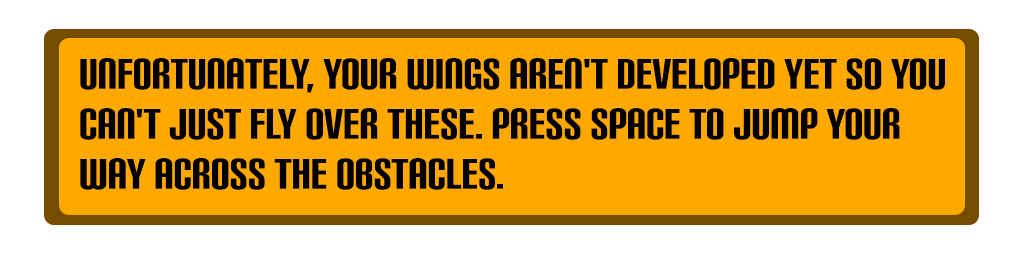
<style>
.page{position:relative;width:1024px;height:256px;background:#ffa800}
.page>*{position:absolute;margin:0}
.t1{font:41.7px "CarbonBl-Regular";color:#000000;scale:0.91 1}
</style>
<div class="page">
<p class="t1" style="left:80px;top:58px;width:865px;height:132px">Unfortunately, your wings aren't developed yet so you can't just fly over these. Press SPACE to jump your way across the obstacles.</p>
</div>
